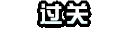
<style>
.page{position:relative;width:128px;height:32px;background:#ffffff}
.page>*{position:absolute;margin:0}
.t1{font:22.7px "DFZongYiW7JF";letter-spacing:0.1em;color:#ffffff;scale:1.05 1}
</style>
<div class="page">
<p class="t1" style="left:40px;top:3px;width:48px;height:21px">过关</p>
<p class="t1" style="left:40px;top:3px;width:48px;height:21px">过关</p>
</div>
